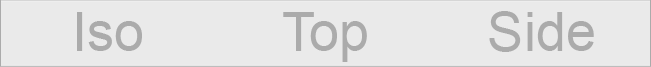
<style>
.page{position:relative;width:651px;height:67px;background:#eaeaea}
.page>*{position:absolute;margin:0}
.t1{font:54.2px "ArialMT";color:#ababab}
</style>
<div class="page">
<p class="t1" style="left:77px;top:12px;width:65px;height:39px">Iso</p>
<p class="t1" style="left:283px;top:12px;width:84px;height:50px">Top</p>
<p class="t1" style="left:489px;top:11px;width:105px;height:41px">Side</p>
</div>
